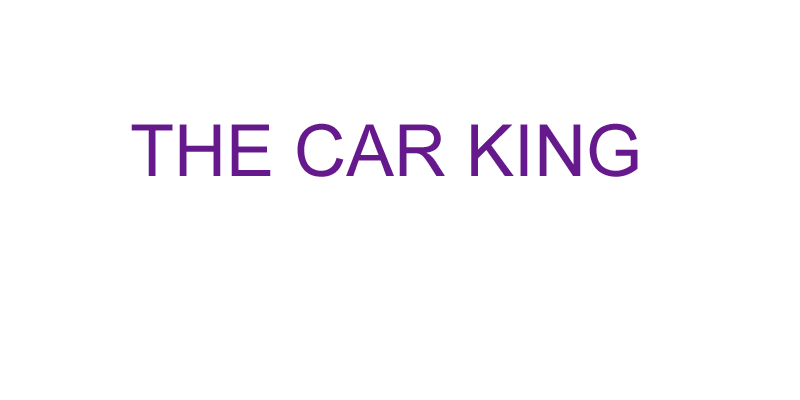
<style>
.page{position:relative;width:800px;height:400px;background:#ffffff}
.page>*{position:absolute;margin:0}
.t1{font:72px "ArialMT";color:#65198c}
</style>
<div class="page">
<p class="t1" style="left:131px;top:123px;width:507px;height:54px">THE CAR KING</p>
</div>
